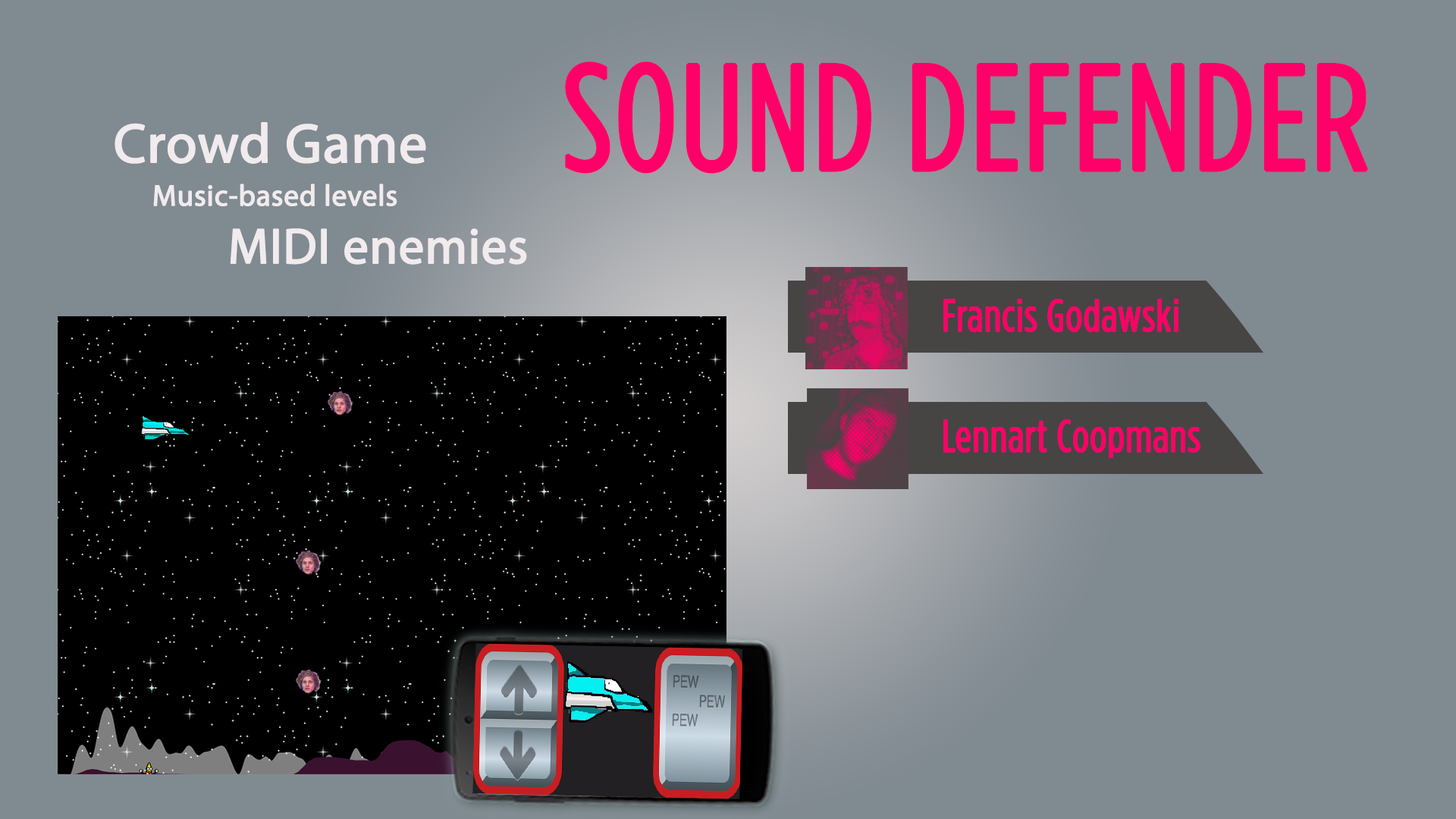
<style>
.page{position:relative;width:1456px;height:819px;background:#808a91}
.page>*{position:absolute;margin:0}
.t1{font:149.6px "GothamCondensed-Book";color:#ff0068;font-weight:bold}
.t2{font:55.4px "MyriadPro-Regular";color:#f1ebee;font-weight:bold}
.t3{font:29.6px "MyriadPro-Regular";color:#f1ebee;font-weight:bold}
.t4{font:50.1px "MyriadPro-Regular";color:#f1ebee;font-weight:bold}
.t5{font:44.8px "GothamCondensed-Book";color:#ff0068;font-weight:bold}
</style>
<div class="page">
<p class="t1" style="left:565px;top:61px;width:803px;height:113px">SOUND DEFENDER</p>
<p class="t2" style="left:115px;top:122px;width:311px;height:42px">Crowd Game</p>
<p class="t3" style="left:153px;top:184px;width:244px;height:22px">Music-based levels</p>
<p class="t4" style="left:230px;top:228px;width:297px;height:37px">MIDI enemies</p>
<p class="t5" style="left:943px;top:299px;width:235px;height:33px">Francis Godawski</p>
<p class="t5" style="left:943px;top:419px;width:257px;height:39px">Lennart Coopmans</p>
</div>
